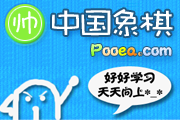
<style>
.page{position:relative;width:180px;height:120px}
.page>*{position:absolute;margin:0}
.t1{font:26.3px "DFPShaoNvW5";color:#ffffff;scale:1.11 1}
.t2{font:33.8px "DFPWaWaW5";color:#ffffff;scale:1.11 1}
.t3{font:16.9px "Jtaiji";color:#ddeaff;scale:1.11 1}
.t4{font:16.9px "Jtaiji";color:#b0ff5c;scale:1.11 1}
.t5{font:16.9px "Jtaiji";color:#ffecc4;scale:1.11 1}
.t6{font:16.9px "Jtaiji";color:#f6ff00;scale:1.11 1}
.t7{font:16.9px "Jtaiji";color:#ffb034;scale:1.11 1}
.t8{font:16.9px "Jtaiji";color:#f1cd94;scale:1.11 1}
</style>
<div class="page">
<p class="t1" style="left:13px;top:11px;width:25px;height:23px">帅</p>
<p class="t2" style="left:52px;top:9px;width:121px;height:28px">中国象棋</p>
<p class="t3" style="left:91px;top:44px;width:81px;height:12px"><span class="t4">P</span><span class="t5">oo</span><span class="t6">e</span><span class="t7">a</span><span class="t8">.</span>com</p>
</div>
